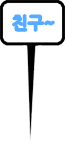
<style>
.page{position:relative;width:65px;height:142px;background:#ffffff}
.page>*{position:absolute;margin:0}
.t1{font:16.5px "NanumGothic";color:#56adff;font-weight:bold}
</style>
<div class="page">
<p class="t1" style="left:13px;top:15px;width:41px;height:16px">친구~</p>
</div>
